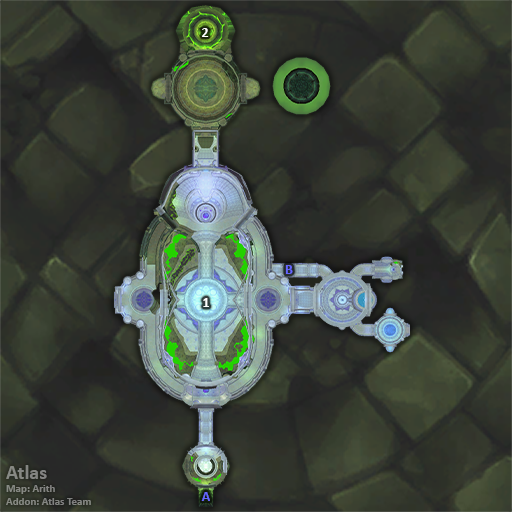
<style>
.page{position:relative;width:512px;height:512px}
.page>*{position:absolute;margin:0}
.t1{font:14px "Calibri-Bold";color:#ffffff}
.t2{font:14px "Calibri-Bold";color:#6666ff}
.t3{font:11px "Calibri-Bold";color:#848682}
.t4{font:20px "Calibri-Bold";color:#848682}
</style>
<div class="page">
<p class="t1" style="left:202px;top:28px;width:7px;height:9px">2</p>
<p class="t2" style="left:285px;top:265px;width:8px;height:9px">B</p>
<p class="t1" style="left:203px;top:298px;width:6px;height:9px">1</p>
<p class="t3" style="left:6px;top:465px;width:85px;height:40px"><span class="t4">Atlas<br></span>Map: Arith<br>Addon: Atlas Team</p>
<p class="t2" style="left:201px;top:492px;width:9px;height:9px">A</p>
</div>
